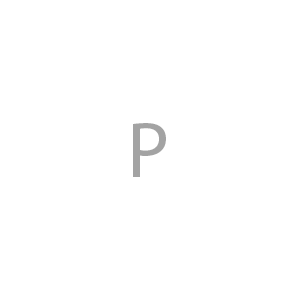
<style>
.page{position:relative;width:300px;height:300px;background:#ffffff}
.page>*{position:absolute;margin:0}
.t1{font:80px "MyriadPro-Regular";color:#a3a3a3}
</style>
<div class="page">
<p class="t1" style="left:133px;top:123px;width:33px;height:54px">P</p>
</div>
